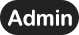
<style>
.page{position:relative;width:79px;height:35px;background:#222222}
.page>*{position:absolute;margin:0}
.t1{font:21.8px "ArialRoundedMTBold";color:#ffffff;scale:0.97 1}
</style>
<div class="page">
<p class="t1" style="left:8px;top:9px;width:64px;height:17px">Admin</p>
</div>
